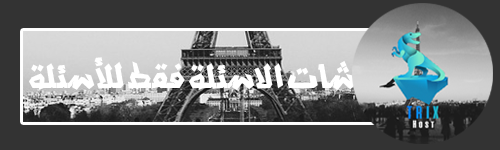
<style>
.page{position:relative;width:500px;height:150px;background:#333333}
.page>*{position:absolute;margin:0}
.t1{font:42px "djadli_Tachkili";color:#ffffff}
</style>
<div class="page">
<p class="t1" style="left:29px;top:57px;width:327px;height:33px">شات الاسئلة فقط للأسئلة</p>
</div>
